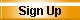
<style>
.page{position:relative;width:80px;height:20px}
.page>*{position:absolute;margin:0}
.t1{font:12px "Arial-BoldMT";color:#101010}
</style>
<div class="page">
<p class="t1" style="left:19px;top:6px;width:42px;height:11px">Sign Up</p>
</div>
